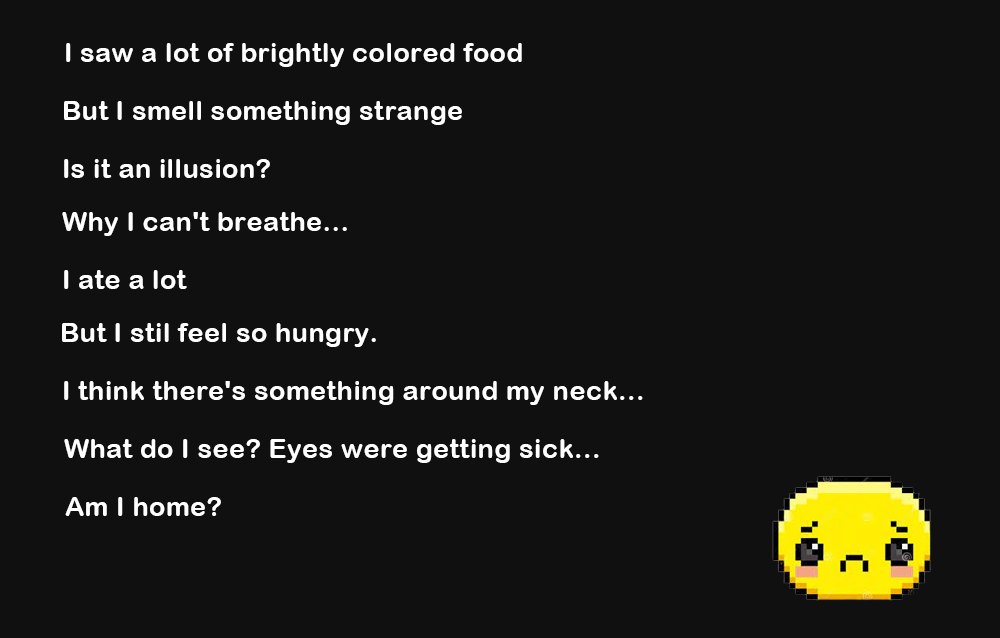
<style>
.page{position:relative;width:1000px;height:638px;background:#0f100f}
.page>*{position:absolute;margin:0}
.t1{font:26.6px "ArialRoundedMTBold";letter-spacing:0.025em;color:#ffffff}
</style>
<div class="page">
<p class="t1" style="left:66px;top:43px;width:456px;height:24px">I saw a lot of brightly colored food</p>
<p class="t1" style="left:64px;top:101px;width:398px;height:24px">But I smell something strange</p>
<p class="t1" style="left:64px;top:159px;width:206px;height:19px">Is it an illusion?</p>
<p class="t1" style="left:62px;top:212px;width:285px;height:24px">Why I can't breathe...</p>
<p class="t1" style="left:64px;top:270px;width:123px;height:19px">I ate a lot</p>
<p class="t1" style="left:62px;top:323px;width:314px;height:24px">But I stil feel so hungry.</p>
<p class="t1" style="left:64px;top:381px;width:579px;height:24px">I think there's something around my neck...</p>
<p class="t1" style="left:64px;top:439px;width:535px;height:24px">What do I see? Eyes were getting sick...</p>
<p class="t1" style="left:65px;top:497px;width:156px;height:19px">Am I home?</p>
</div>
